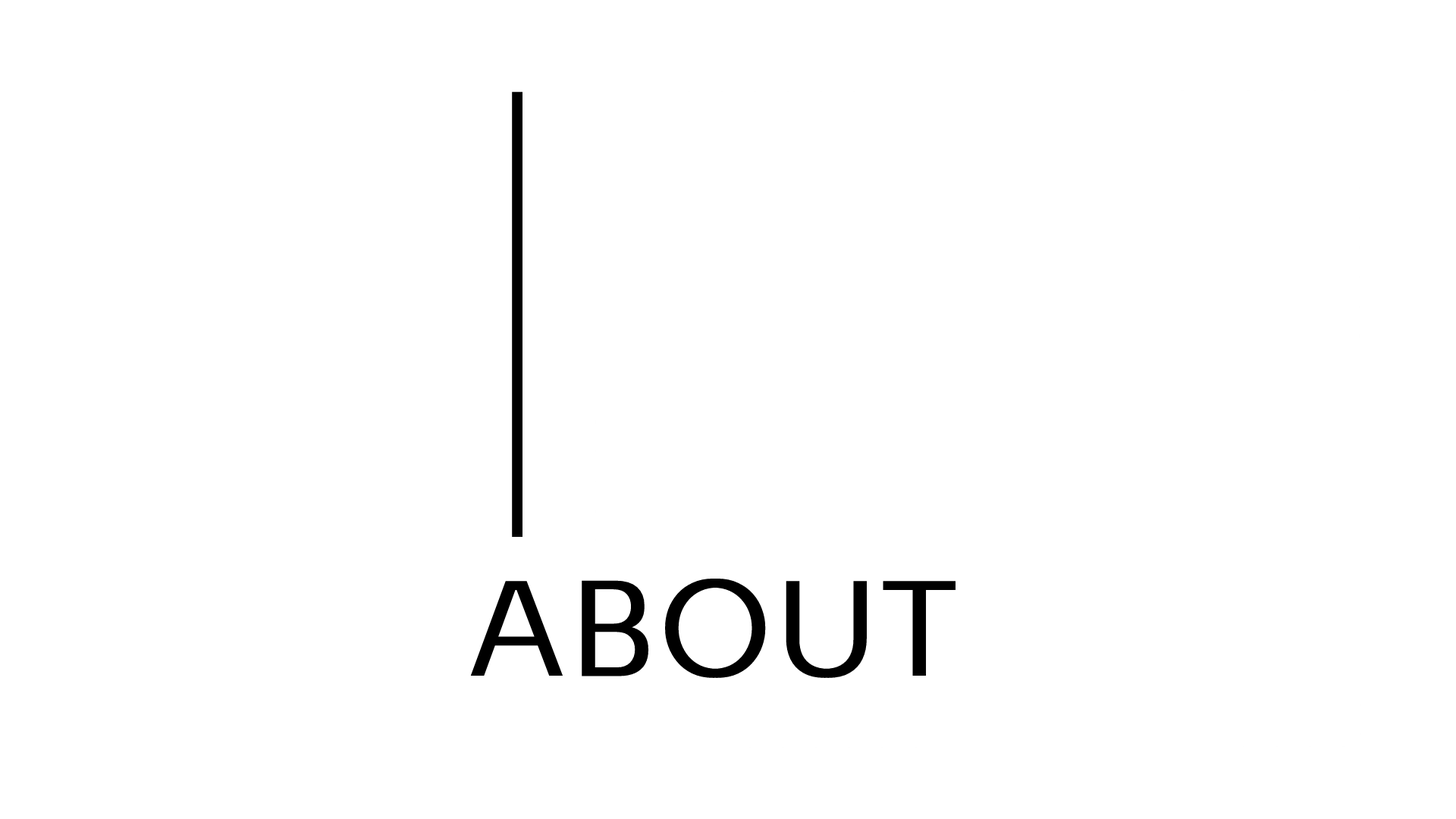
<style>
.page{position:relative;width:1456px;height:819px;background:#ffffff}
.page>*{position:absolute;margin:0}
.t1{font:129.7px "Sora-Light";color:#000000;font-weight:bold}
</style>
<div class="page">
<p class="t1" style="left:470px;top:578px;width:486px;height:100px">ABOUT</p>
</div>
